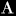
<style>
.page{position:relative;width:16px;height:16px;background:#000000}
.page>*{position:absolute;margin:0}
.t1{font:16px "Didot";color:#ffffff}
</style>
<div class="page">
<p class="t1" style="left:1px;top:1px;width:13px;height:13px">A</p>
</div>
